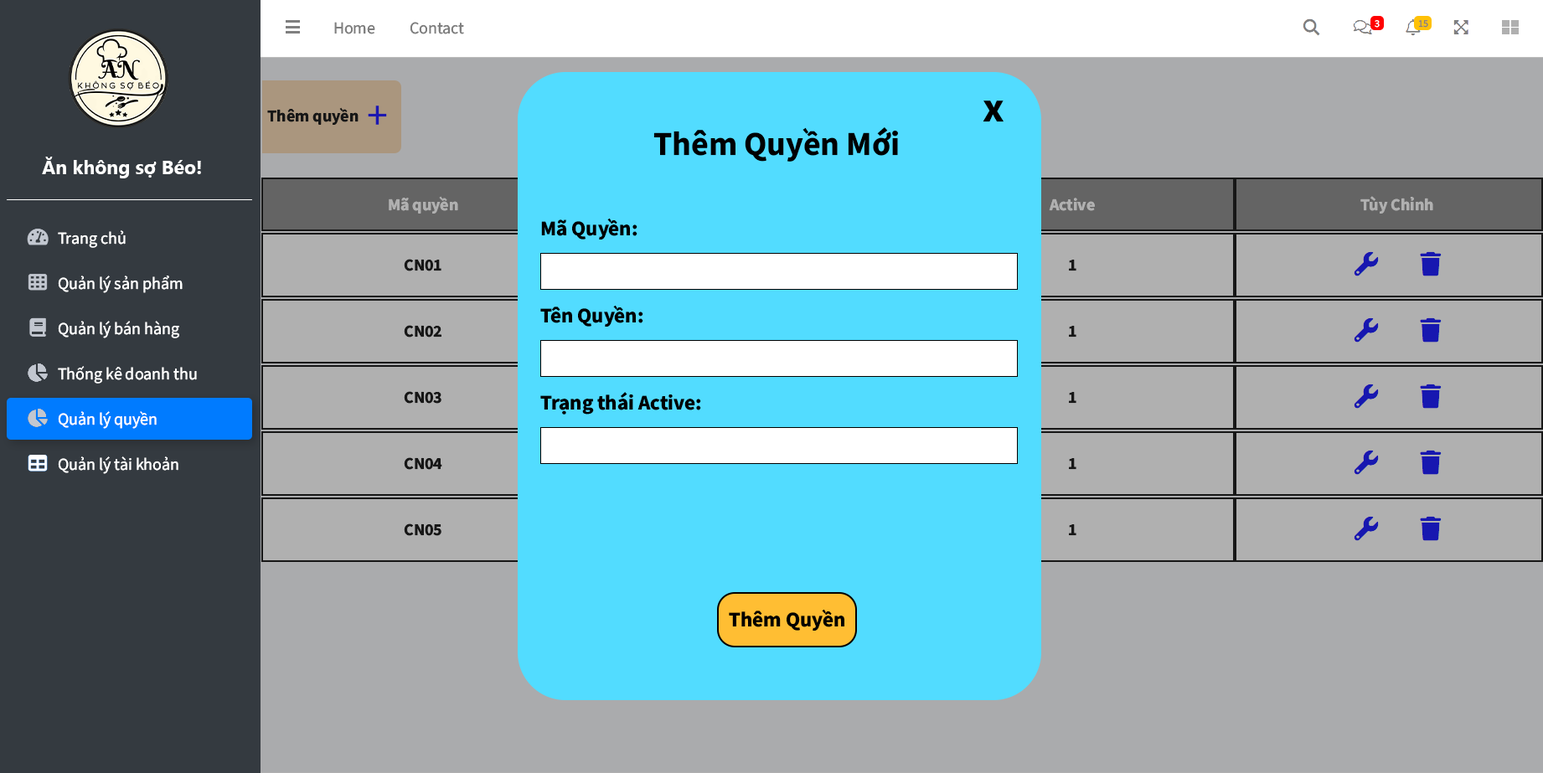
<style>
.page{position:relative;width:1543px;height:773px;background:#aaabad}
.page>*{position:absolute;margin:0}
.t1{font:16.7px "SourceSansRoman-Regular";color:#7f7f7f}
.t2{font:10px "SourceSansRoman-Regular";color:#ffffff}
.t3{font:10px "SourceSansRoman-Regular";color:#857f7f}
.t4{font:41.9px "SourceSansRoman-Bold";color:#000000}
.t5{font:16.7px "SourceSansRoman-Bold";color:#000000}
.t6{font:41.9px "SourceSansRoman-Regular";color:#1b17b0}
.t7{font:33.5px "SourceSansRoman-Bold";color:#000000}
.t8{font:19.3px "SegoeUI-Bold";color:#ffffff}
.t9{font:16.7px "SourceSansRoman-Bold";color:#b0b0b0}
.t10{font:20.9px "SourceSansRoman-Bold";color:#000000}
.t11{font:16.7px "SourceSansRoman-Regular";color:#ffffff}
</style>
<div class="page">
<p class="t1" style="left:334px;top:22px;width:41px;height:12px">Home</p>
<p class="t1" style="left:410px;top:22px;width:54px;height:12px">Contact</p>
<p class="t2" style="left:1374px;top:20px;width:5px;height:8px">3</p>
<p class="t3" style="left:1418px;top:20px;width:10px;height:8px">15</p>
<p class="t4" style="left:982px;top:100px;width:21px;height:22px">x</p>
<p class="t5" style="left:267px;top:107px;width:91px;height:18px">Thêm quyền</p>
<p class="t6" style="left:368px;top:106px;width:19px;height:19px">+</p>
<p class="t7" style="left:653px;top:127px;width:245px;height:35px">Thêm Quyền Mới</p>
<p class="t8" style="left:42px;top:157px;width:159px;height:21px">Ăn không sợ Béo!</p>
<p class="t9" style="left:389px;top:196px;width:69px;height:18px">Mã quyền</p>
<p class="t9" style="left:1049px;top:198px;width:46px;height:13px">Active</p>
<p class="t9" style="left:1360px;top:196px;width:73px;height:18px">Tùy Chỉnh</p>
<p class="t10" style="left:541px;top:219px;width:96px;height:21px">Mã Quyền:</p>
<p class="t11" style="left:58px;top:230px;width:68px;height:18px">Trang chủ</p>
<p class="t5" style="left:404px;top:259px;width:37px;height:12px">CN01</p>
<p class="t5" style="left:1069px;top:260px;width:7px;height:11px">1</p>
<p class="t11" style="left:58px;top:276px;width:125px;height:17px">Quản lý sản phẩm</p>
<p class="t10" style="left:540px;top:306px;width:103px;height:21px">Tên Quyền:</p>
<p class="t11" style="left:58px;top:321px;width:121px;height:17px">Quản lý bán hàng</p>
<p class="t5" style="left:404px;top:325px;width:37px;height:13px">CN02</p>
<p class="t5" style="left:1069px;top:326px;width:7px;height:12px">1</p>
<p class="t11" style="left:58px;top:366px;width:139px;height:18px">Thống kê doanh thu</p>
<p class="t5" style="left:404px;top:391px;width:37px;height:13px">CN03</p>
<p class="t10" style="left:540px;top:392px;width:161px;height:23px">Trạng thái Active:</p>
<p class="t5" style="left:1069px;top:392px;width:7px;height:12px">1</p>
<p class="t11" style="left:58px;top:411px;width:99px;height:18px">Quản lý quyền</p>
<p class="t11" style="left:58px;top:456px;width:120px;height:18px">Quản lý tài khoản</p>
<p class="t5" style="left:404px;top:457px;width:38px;height:13px">CN04</p>
<p class="t5" style="left:1069px;top:458px;width:7px;height:12px">1</p>
<p class="t5" style="left:404px;top:523px;width:37px;height:13px">CN05</p>
<p class="t5" style="left:1069px;top:524px;width:7px;height:12px">1</p>
<p class="t10" style="left:729px;top:610px;width:115px;height:21px">Thêm Quyền</p>
</div>
